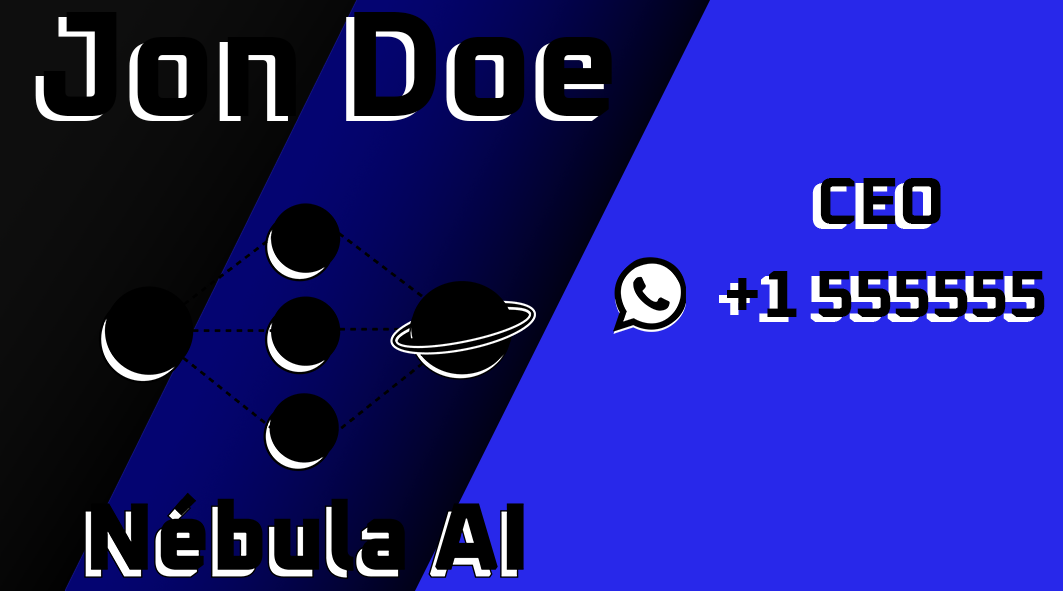
<style>
.page{position:relative;width:1063px;height:591px;background:#2828ea}
.page>*{position:absolute;margin:0}
.t1{font:150px "OxaniumRoman-Bold"}
.t2{font:150px "OxaniumRoman-Bold";color:#000000}
.t3{font:66.7px "OxaniumRoman-Bold";color:#ffffff}
.t4{font:66.7px "OxaniumRoman-Bold";color:#000000}
</style>
<div class="page">
<p class="t1" style="left:35px;top:17px;width:569px;height:104px">Jon Doe</p>
<p class="t2" style="left:43px;top:12px;width:569px;height:104px">Jon Doe</p>
<p class="t3" style="left:812px;top:183px;width:121px;height:46px">CEO</p>
<p class="t4" style="left:820px;top:178px;width:121px;height:46px">CEO</p>
<p class="t3" style="left:719px;top:276px;width:318px;height:46px">+1 555555</p>
<p class="t4" style="left:727px;top:271px;width:318px;height:46px">+1 555555</p>
</div>
